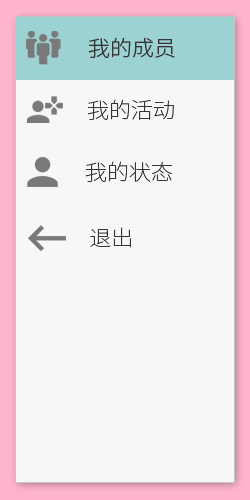
<style>
.page{position:relative;width:250px;height:500px;background:#f7f7f7}
.page>*{position:absolute;margin:0}
.t1{font:21.6px "NotoSansCJKsc-Light";color:#353535}
.t2{font:21.6px "NotoSansCJKsc-Thin";color:#353535}
</style>
<div class="page">
<p class="t1" style="left:88px;top:37px;width:87px;height:21px">我的成员</p>
<p class="t2" style="left:87px;top:99px;width:87px;height:21px">我的活动</p>
<p class="t2" style="left:85px;top:161px;width:87px;height:21px">我的状态</p>
<p class="t2" style="left:90px;top:227px;width:41px;height:21px">退出</p>
</div>
